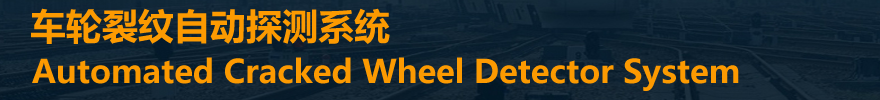
<style>
.page{position:relative;width:880px;height:100px}
.page>*{position:absolute;margin:0}
.t1{font:36px "MicrosoftYaHei-Bold";color:#fc9a01}
.t2{font:32px "MicrosoftYaHei-Bold";color:#fc9a01}
</style>
<div class="page">
<p class="t1" style="left:31px;top:8px;width:359px;height:36px">车轮裂纹自动探测系统</p>
<p class="t2" style="left:32px;top:57px;width:707px;height:34px">Automated Cracked Wheel Detector System</p>
</div>
